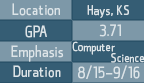
<style>
.page{position:relative;width:144px;height:83px;background:#355d74}
.page>*{position:absolute;margin:0}
.t1{font:12px "qontra-Regular";color:#dce4e8}
.t2{font:13.3px "qontra-Regular";color:#dce4e8}
.t3{font:16px "qontra-Regular";color:#dce4e8}
.t4{font:12.7px "qontra-Regular";color:#dce4e8}
</style>
<div class="page">
<p class="t1" style="left:12px;top:3px;width:48px;height:13px">Location</p>
<p class="t2" style="left:87px;top:5px;width:42px;height:13px">Hays, KS</p>
<p class="t1" style="left:25px;top:25px;width:22px;height:13px">GPA</p>
<p class="t3" style="left:99px;top:24px;width:22px;height:13px">3.71</p>
<p class="t4" style="left:72px;top:41px;width:43px;height:14px">Computer</p>
<p class="t1" style="left:11px;top:45px;width:53px;height:17px">Emphasis</p>
<p class="t4" style="left:111px;top:53px;width:33px;height:10px">Science</p>
<p class="t1" style="left:13px;top:65px;width:48px;height:13px">Duration</p>
<p class="t1" style="left:78px;top:65px;width:62px;height:14px">8/15-9/16</p>
</div>
